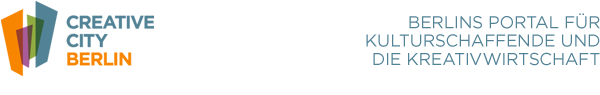
<style>
.page{position:relative;width:600px;height:95px;background:#ffffff}
.page>*{position:absolute;margin:0}
.t1{font:17.3px/18.3px "Gotham-Book";letter-spacing:-0.01em;color:#528295;text-transform:uppercase}
</style>
<div class="page">
<p class="t1" style="left:366px;top:13px;width:234px;height:53px;text-align:right">Berlins Portal für<br>Kulturschaffende und<br>die Kreativwirtschaft</p>
</div>
